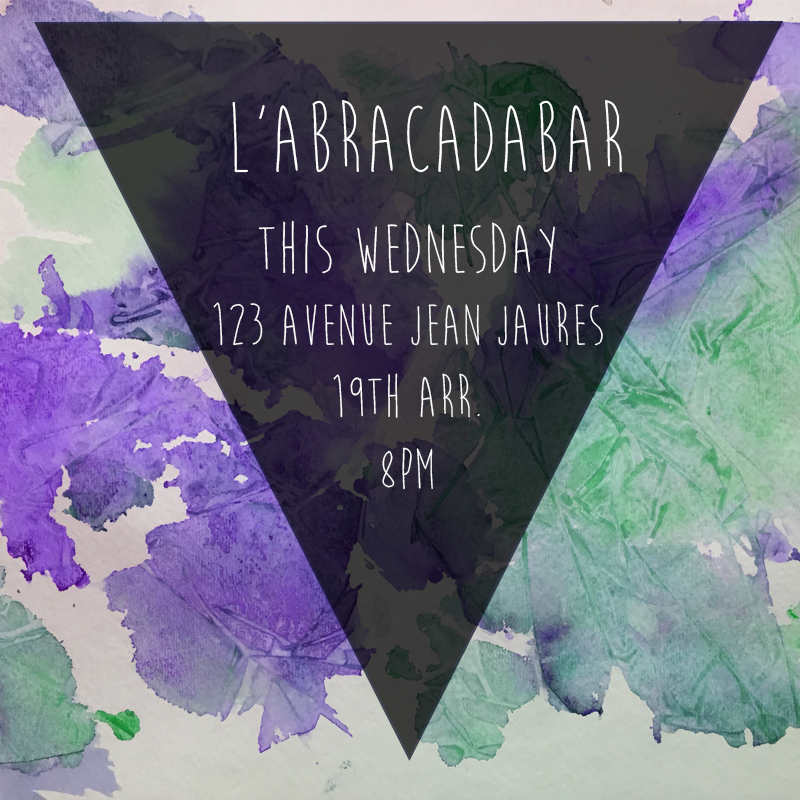
<style>
.page{position:relative;width:800px;height:800px}
.page>*{position:absolute;margin:0}
.t1{font:100px "MoonFlower";color:#ffffff}
.t2{font:60px/24px "MoonFlower";color:#ffffff}
.t3{font:72px/24px "MoonFlower";color:#ffffff}
</style>
<div class="page">
<p class="t1" style="left:232px;top:100px;width:390px;height:73px">l’abracadabar</p>
<p class="t2" style="left:213px;top:220px;width:390px;height:270px;text-align:center"><span class="t3">this wednesday<br><br><br></span>123 avenue jean jaures<br><br><br>19th arr.<br><br><br>8pm</p>
</div>
